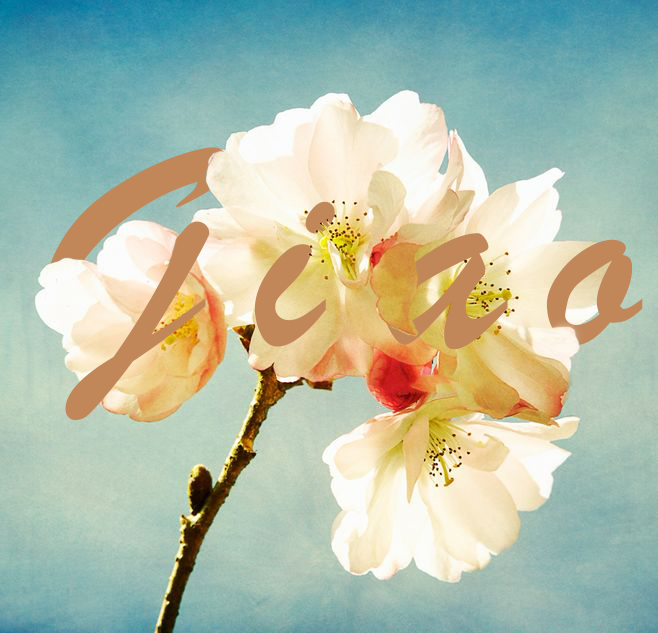
<style>
.page{position:relative;width:658px;height:633px}
.page>*{position:absolute;margin:0}
.t1{font:299px "STXingkai";letter-spacing:0.18em;color:#c18759}
</style>
<div class="page">
<p class="t1" style="left:45px;top:147px;width:598px;height:274px">Giao</p>
</div>
